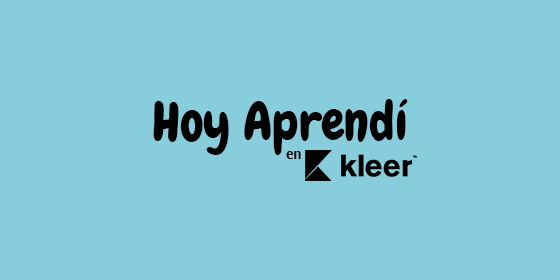
<style>
.page{position:relative;width:560px;height:280px;background:#88cddc}
.page>*{position:absolute;margin:0}
.t1{font:52.6px "Chewy";color:#000000}
.t2{font:14px "Roboto-Bold";color:#000000}
</style>
<div class="page">
<p class="t1" style="left:153px;top:99px;width:255px;height:56px">Hoy Aprendí</p>
<p class="t2" style="left:286px;top:151px;width:15px;height:8px">en</p>
</div>
